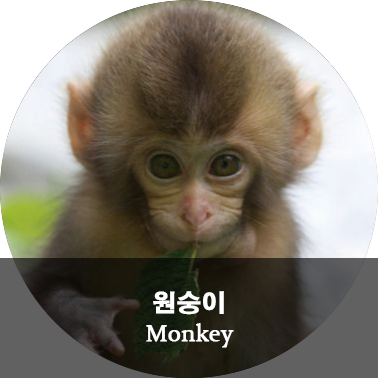
<style>
.page{position:relative;width:378px;height:378px}
.page>*{position:absolute;margin:0}
.t1{font:24px/30px "Constantia";color:#ffffff;font-weight:bold}
.t2{font:24px/30px "H2gtrE";color:#ffffff;font-weight:bold}
</style>
<div class="page">
<p class="t1" style="left:146px;top:291px;width:88px;height:57px;text-align:center"><span class="t2">원숭이<br></span>Monkey</p>
</div>
